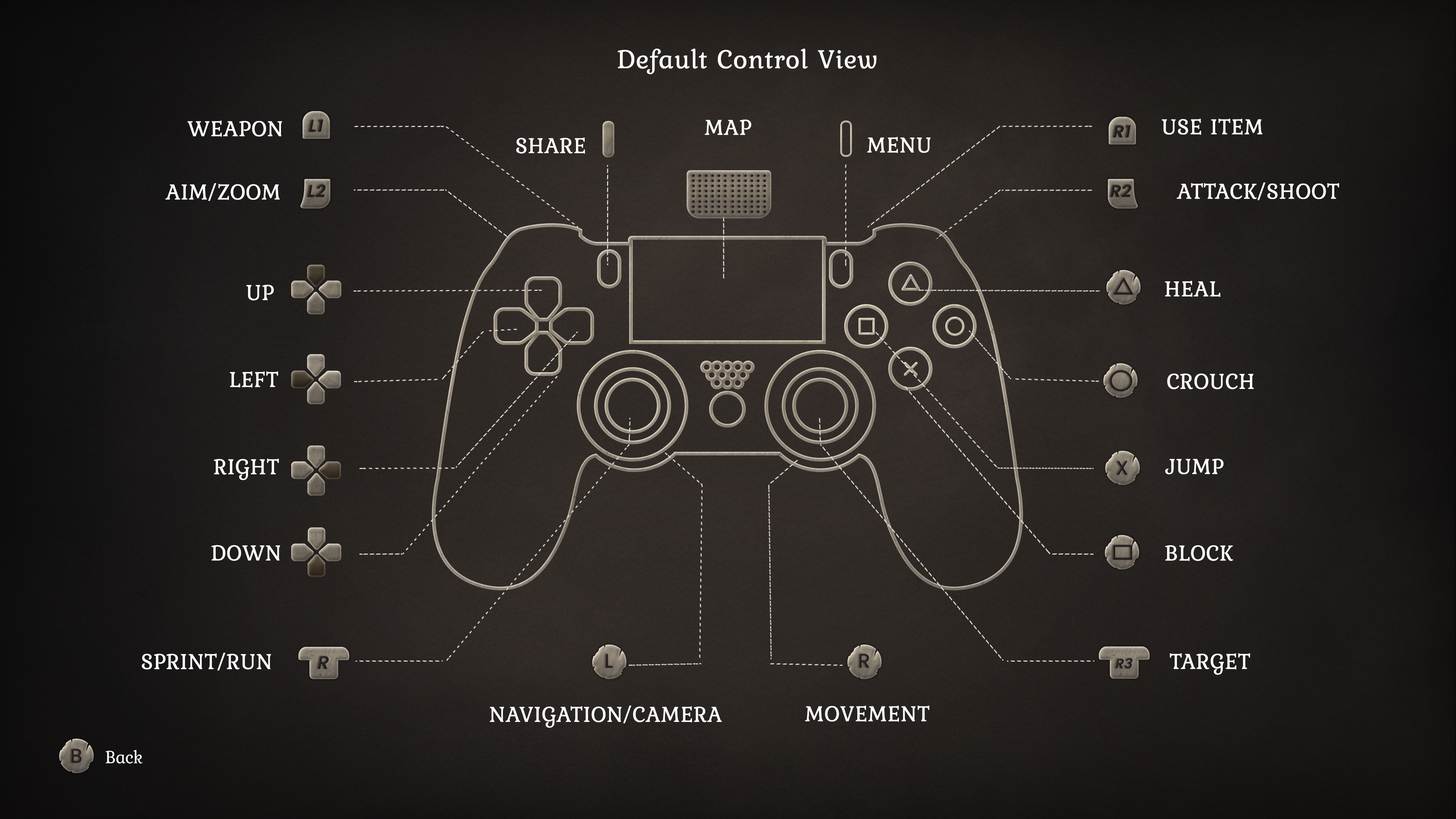
<style>
.page{position:relative;width:1456px;height:819px}
.page>*{position:absolute;margin:0}
.t1{font:27.3px "Kurale-Regular";color:#ffffff;font-weight:bold}
.t2{font:22.7px "Kurale-Regular";color:#ffffff;font-weight:bold}
.t3{font:17.1px "Poppins-SemiBoldItalic";color:#201e1e;font-weight:bold}
.t4{font:19.6px "Poppins-Regular";color:#201e1e;font-weight:bold}
.t5{font:18.2px "Poppins-MediumItalic";color:#201e1e;font-weight:bold}
.t6{font:17.1px "Poppins-Regular";font-weight:bold}
.t7{font:13.6px "Poppins-MediumItalic";color:#201e1e;font-weight:bold}
.t8{font:18.2px "Kurale-Regular";letter-spacing:-0.02em;color:#ffffff}
</style>
<div class="page">
<p class="t1" style="left:618px;top:49px;width:259px;height:25px">Default Control View</p>
<p class="t2" style="left:187px;top:120px;width:95px;height:17px">WEAPON</p>
<p class="t3" style="left:309px;top:119px;width:14px;height:13px">L1</p>
<p class="t2" style="left:704px;top:119px;width:47px;height:16px">MAP</p>
<p class="t3" style="left:1113px;top:125px;width:18px;height:13px">R1</p>
<p class="t2" style="left:1161px;top:118px;width:102px;height:17px">USE ITEM</p>
<p class="t2" style="left:516px;top:137px;width:69px;height:17px">SHARE</p>
<p class="t2" style="left:867px;top:136px;width:64px;height:17px">MENU</p>
<p class="t2" style="left:165px;top:183px;width:115px;height:18px">AIM/ZOOM</p>
<p class="t3" style="left:308px;top:184px;width:18px;height:13px">L2</p>
<p class="t3" style="left:1110px;top:184px;width:21px;height:13px">R2</p>
<p class="t2" style="left:1177px;top:182px;width:162px;height:18px">ATTACK/SHOOT</p>
<p class="t2" style="left:1165px;top:281px;width:56px;height:16px">HEAL</p>
<p class="t2" style="left:246px;top:285px;width:28px;height:16px">UP</p>
<p class="t2" style="left:230px;top:371px;width:48px;height:17px">LEFT</p>
<p class="t2" style="left:1167px;top:373px;width:87px;height:16px">CROUCH</p>
<p class="t2" style="left:214px;top:458px;width:65px;height:22px">RIGHT</p>
<p class="t4" style="left:1117px;top:461px;width:11px;height:14px">X</p>
<p class="t2" style="left:1165px;top:458px;width:59px;height:16px">JUMP</p>
<p class="t2" style="left:211px;top:545px;width:69px;height:16px">DOWN</p>
<p class="t2" style="left:1165px;top:545px;width:68px;height:16px">BLOCK</p>
<p class="t2" style="left:142px;top:653px;width:129px;height:18px">SPRINT/RUN</p>
<p class="t4" style="left:606px;top:654px;width:7px;height:14px">L</p>
<p class="t4" style="left:860px;top:654px;width:9px;height:14px">R</p>
<p class="t2" style="left:1170px;top:653px;width:80px;height:22px">TARGET</p>
<p class="t5" style="left:318px;top:656px;width:11px;height:13px">R</p>
<p class="t6" style="left:607px;top:654px;width:6px;height:13px">L</p>
<p class="t7" style="left:1115px;top:658px;width:18px;height:10px">R3</p>
<p class="t2" style="left:489px;top:705px;width:233px;height:23px">NAVIGATION/CAMERA</p>
<p class="t2" style="left:805px;top:705px;width:124px;height:17px">MOVEMENT</p>
<p class="t4" style="left:72px;top:749px;width:10px;height:14px">B</p>
<p class="t8" style="left:105px;top:750px;width:38px;height:14px">Back</p>
</div>
